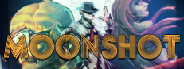
<style>
.page{position:relative;width:184px;height:69px}
.page>*{position:absolute;margin:0}
.t1{font:30px "Akka";color:#ffad3b}
</style>
<div class="page">
<p class="t1" style="left:3px;top:34px;width:177px;height:25px">MOONSHOT</p>
</div>
